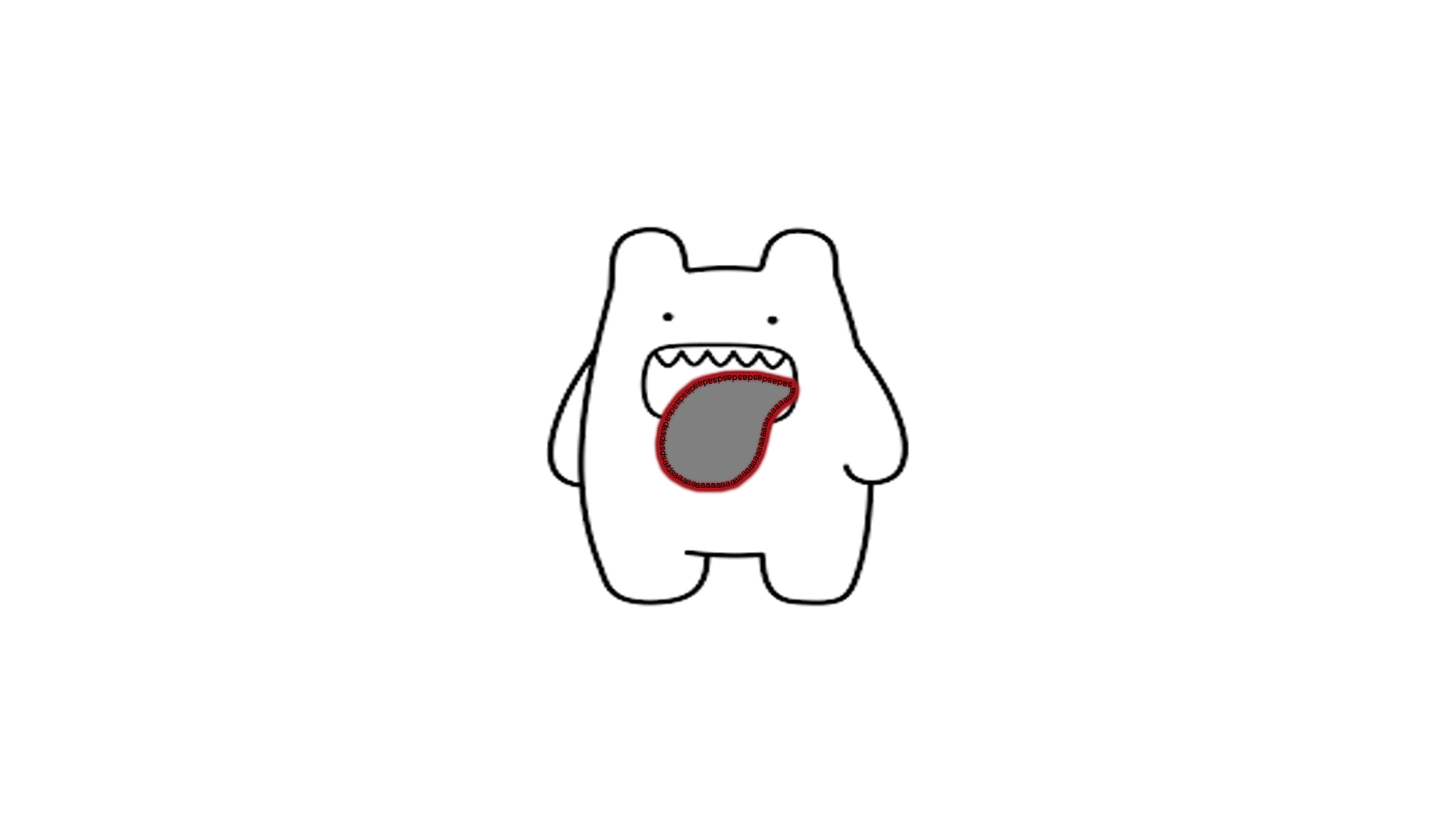
<style>
.page{position:relative;width:1456px;height:819px;background:#ffffff}
.page>*{position:absolute;margin:0}
.t1{font:9.1px "Gulim";color:#000000}
</style>
<div class="page">
<p class="t1" style="left:659px;top:375px;width:136px;height:113px">sadasdasdasdasdsadasdasdasdsadasdasdsafdsaaaaaaaaaaaaaaaaaaaaaaaaaaaaaaaaaaaa</p>
</div>
